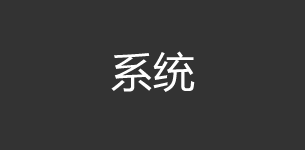
<style>
.page{position:relative;width:305px;height:150px;background:#333333}
.page>*{position:absolute;margin:0}
.t1{font:41.7px "MicrosoftYaHei";color:#ffffff}
</style>
<div class="page">
<p class="t1" style="left:111px;top:51px;width:84px;height:41px">系统</p>
</div>
